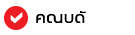
<style>
.page{position:relative;width:135px;height:35px;background:#ffffff}
.page>*{position:absolute;margin:0}
.t1{font:16.8px "supermarket";letter-spacing:0.025em;color:#000000;scale:1.21 1}
</style>
<div class="page">
<p class="t1" style="left:36px;top:11px;width:50px;height:12px">คณบดั</p>
</div>
